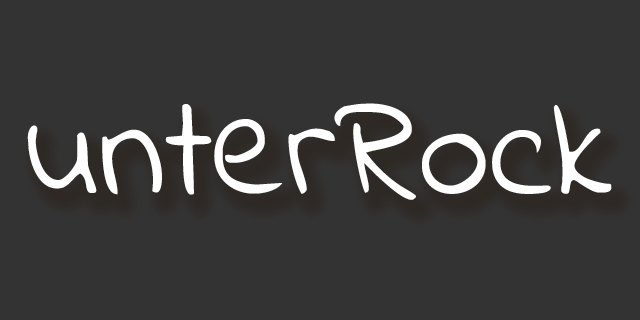
<style>
.page{position:relative;width:640px;height:320px;background:#333333}
.page>*{position:absolute;margin:0}
.t1{font:144px "IndieFlower";color:#ffffff}
</style>
<div class="page">
<p class="t1" style="left:27px;top:103px;width:585px;height:97px">unterRock</p>
</div>
